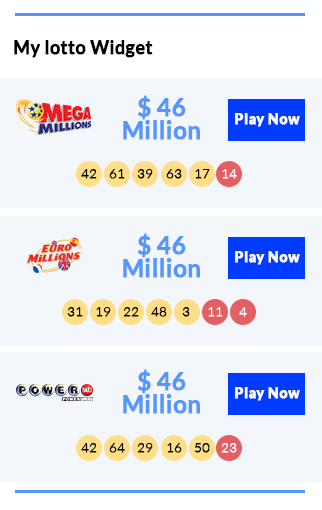
<style>
.page{position:relative;width:322px;height:510px;background:#f3f7fc}
.page>*{position:absolute;margin:0}
.t1{font:18px "Lato-Bold";color:#000000;font-weight:bold}
.t2{font:24px/23px "Lato-Bold";color:#5596ff;font-weight:bold}
.t3{font:24px "Lato-Bold";color:#5596ff;font-weight:bold}
.t4{font:14.3px "Lato-Black";color:#fefefe;font-weight:bold}
.t5{font:13px "Lato-Light";color:#000000;font-weight:bold}
.t6{font:13px "Lato-Light";color:#fefefe;font-weight:bold}
</style>
<div class="page">
<p class="t1" style="left:14px;top:40px;width:139px;height:18px">My lotto Widget</p>
<p class="t2" style="left:123px;top:95px;width:77px;height:45px;text-align:center"><span class="t3">$ 46 <br></span>Million</p>
<p class="t4" style="left:235px;top:113px;width:65px;height:14px">Play Now</p>
<p class="t5" style="left:81px;top:169px;width:16px;height:10px">42</p>
<p class="t5" style="left:109px;top:169px;width:16px;height:10px">61</p>
<p class="t5" style="left:137px;top:169px;width:16px;height:10px">39</p>
<p class="t5" style="left:166px;top:169px;width:16px;height:10px">63</p>
<p class="t5" style="left:195px;top:169px;width:15px;height:10px">17</p>
<p class="t6" style="left:222px;top:169px;width:15px;height:10px">14</p>
<p class="t2" style="left:123px;top:233px;width:77px;height:45px;text-align:center"><span class="t3">$ 46 <br></span>Million</p>
<p class="t4" style="left:235px;top:251px;width:65px;height:14px">Play Now</p>
<p class="t5" style="left:67px;top:307px;width:16px;height:10px">31</p>
<p class="t5" style="left:96px;top:307px;width:15px;height:10px">19</p>
<p class="t5" style="left:123px;top:307px;width:16px;height:10px">22</p>
<p class="t5" style="left:151px;top:307px;width:16px;height:10px">48</p>
<p class="t5" style="left:182px;top:307px;width:8px;height:10px">3</p>
<p class="t6" style="left:208px;top:307px;width:15px;height:10px">11</p>
<p class="t6" style="left:239px;top:307px;width:8px;height:10px">4</p>
<p class="t2" style="left:123px;top:369px;width:77px;height:45px;text-align:center"><span class="t3">$ 46 <br></span>Million</p>
<p class="t4" style="left:235px;top:387px;width:65px;height:14px">Play Now</p>
<p class="t5" style="left:81px;top:443px;width:16px;height:10px">42</p>
<p class="t5" style="left:109px;top:443px;width:16px;height:10px">64</p>
<p class="t5" style="left:137px;top:443px;width:16px;height:10px">29</p>
<p class="t5" style="left:167px;top:443px;width:15px;height:10px">16</p>
<p class="t5" style="left:194px;top:443px;width:16px;height:10px">50</p>
<p class="t6" style="left:221px;top:443px;width:16px;height:10px">23</p>
</div>
